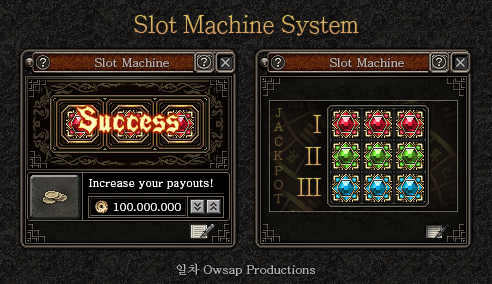
<style>
.page{position:relative;width:492px;height:284px}
.page>*{position:absolute;margin:0}
.t1{font:24px "AdobeMingStd-Light";color:#daa761}
.t2{font:12px "AdobeMyungjoStd-Medium";color:#bfb2af}
.t3{font:12px "AdobeMingStd-Light";color:#624d2b}
.t4{font:24px "AdobeMingStd-Light";color:#d8a95e}
.t5{font:24px "AdobeMingStd-Light";color:#d8aa5f}
.t6{font:11px "AdobeMyungjoStd-Medium";color:#ffffff}
.t7{font:24px "AdobeMingStd-Light";color:#d8ab61}
.t8{font:12px "AdobeMyungjoStd-Medium";color:#b1b1b1}
</style>
<div class="page">
<p class="t1" style="left:134px;top:15px;width:225px;height:21px">Slot Machine System</p>
<p class="t2" style="left:94px;top:58px;width:75px;height:9px">Slot Machine</p>
<p class="t2" style="left:329px;top:58px;width:75px;height:9px">Slot Machine</p>
<p class="t3" style="left:273px;top:108px;width:11px;height:95px;text-align:center">J<br>A<br>C<br>K<br>P<br>O<br>T</p>
<p class="t4" style="left:313px;top:115px;width:8px;height:18px">I</p>
<p class="t5" style="left:305px;top:147px;width:16px;height:18px">II</p>
<p class="t6" style="left:89px;top:179px;width:124px;height:10px">Increase your payouts!</p>
<p class="t7" style="left:297px;top:178px;width:24px;height:18px">III</p>
<p class="t6" style="left:114px;top:203px;width:67px;height:8px">100.000.000</p>
<p class="t8" style="left:176px;top:263px;width:139px;height:13px">일차 Owsap Productions</p>
</div>
